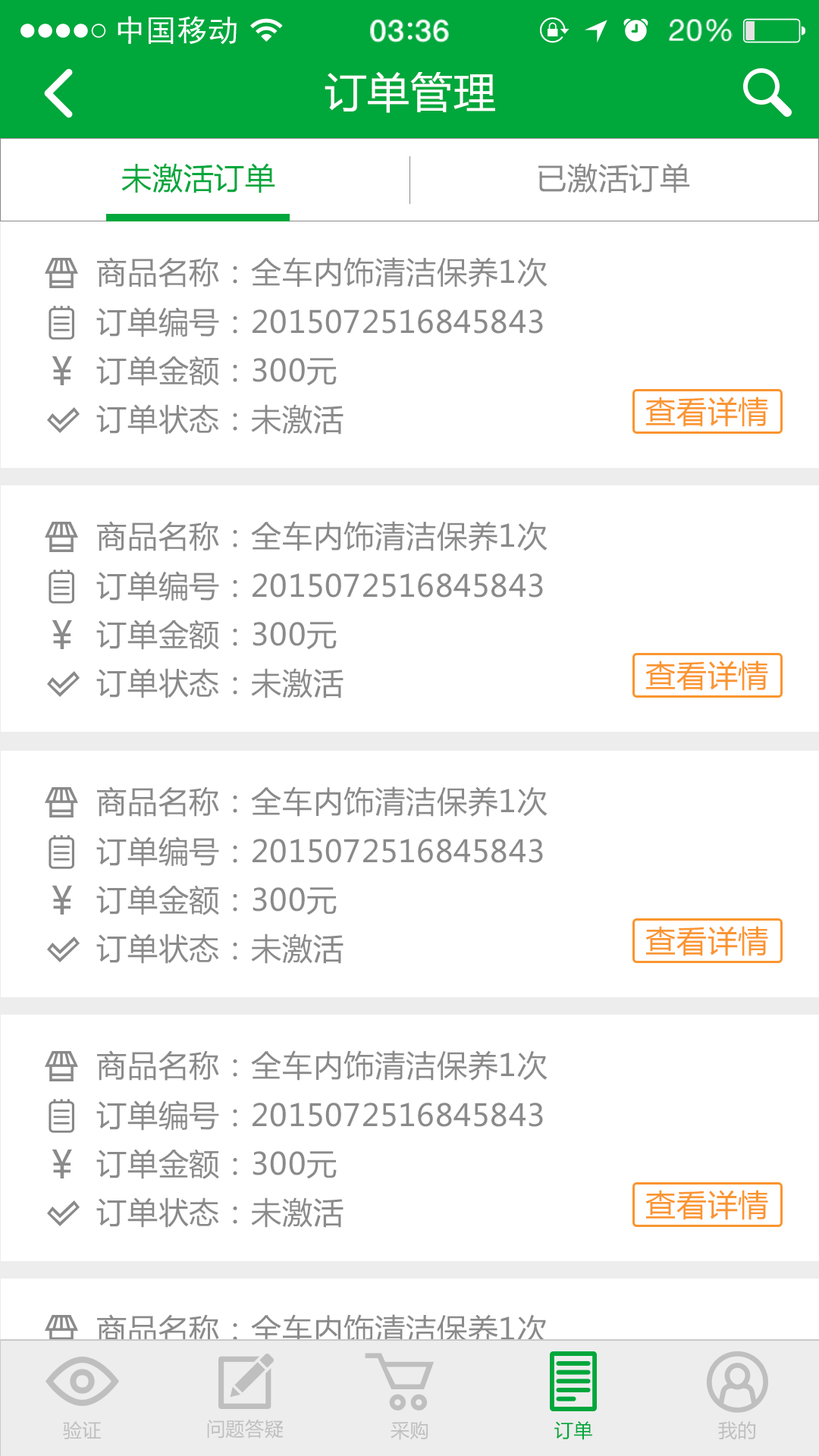
<style>
.page{position:relative;width:819px;height:1456px;background:#ffffff}
.page>*{position:absolute;margin:0}
.t1{font:41.7px "MicrosoftYaHei";letter-spacing:0.02em;color:#ffffff}
.t2{font:30.3px "MicrosoftYaHei";letter-spacing:0.02em;color:#00a73b}
.t3{font:30.3px "MicrosoftYaHei";letter-spacing:0.02em;color:#8a8a8a}
.t4{font:38.4px "MicrosoftYaHei";letter-spacing:0.02em;color:#8a8a8a}
.t5{font:30.3px "MicrosoftYaHei";letter-spacing:0.02em;color:#fa9531}
.t6{font:18.9px "MicrosoftYaHei";letter-spacing:0.02em;color:#bfbfbf}
.t7{font:18.9px "MicrosoftYaHei";letter-spacing:0.02em;color:#00a73b}
</style>
<div class="page">
<p class="t1" style="left:325px;top:71px;width:170px;height:42px">订单管理</p>
<p class="t2" style="left:121px;top:163px;width:154px;height:30px">未激活订单</p>
<p class="t3" style="left:538px;top:163px;width:152px;height:30px">已激活订单</p>
<p class="t3" style="left:97px;top:257px;width:451px;height:30px">商品名称：全车内饰清洁保养1次</p>
<p class="t3" style="left:96px;top:307px;width:447px;height:30px">订单编号：2015072516845843</p>
<p class="t4" style="left:52px;top:356px;width:20px;height:29px">¥</p>
<p class="t3" style="left:96px;top:356px;width:241px;height:30px">订单金额：300元</p>
<p class="t5" style="left:645px;top:397px;width:123px;height:30px">查看详情</p>
<p class="t3" style="left:96px;top:404px;width:248px;height:31px">订单状态：未激活</p>
<p class="t3" style="left:97px;top:521px;width:451px;height:30px">商品名称：全车内饰清洁保养1次</p>
<p class="t3" style="left:96px;top:571px;width:447px;height:30px">订单编号：2015072516845843</p>
<p class="t4" style="left:52px;top:620px;width:20px;height:29px">¥</p>
<p class="t3" style="left:96px;top:620px;width:241px;height:30px">订单金额：300元</p>
<p class="t5" style="left:645px;top:660px;width:123px;height:31px">查看详情</p>
<p class="t3" style="left:96px;top:668px;width:248px;height:30px">订单状态：未激活</p>
<p class="t3" style="left:97px;top:786px;width:451px;height:31px">商品名称：全车内饰清洁保养1次</p>
<p class="t3" style="left:96px;top:836px;width:447px;height:31px">订单编号：2015072516845843</p>
<p class="t4" style="left:52px;top:885px;width:20px;height:30px">¥</p>
<p class="t3" style="left:96px;top:885px;width:241px;height:30px">订单金额：300元</p>
<p class="t5" style="left:645px;top:926px;width:123px;height:30px">查看详情</p>
<p class="t3" style="left:96px;top:933px;width:248px;height:31px">订单状态：未激活</p>
<p class="t3" style="left:97px;top:1050px;width:451px;height:31px">商品名称：全车内饰清洁保养1次</p>
<p class="t3" style="left:96px;top:1100px;width:447px;height:31px">订单编号：2015072516845843</p>
<p class="t4" style="left:52px;top:1149px;width:20px;height:29px">¥</p>
<p class="t3" style="left:96px;top:1149px;width:241px;height:30px">订单金额：300元</p>
<p class="t5" style="left:645px;top:1190px;width:123px;height:30px">查看详情</p>
<p class="t3" style="left:96px;top:1197px;width:248px;height:31px">订单状态：未激活</p>
<p class="t3" style="left:97px;top:1314px;width:451px;height:31px">商品名称：全车内饰清洁保养1次</p>
<p class="t6" style="left:63px;top:1421px;width:38px;height:18px">验证</p>
<p class="t6" style="left:207px;top:1420px;width:77px;height:19px">问题答疑</p>
<p class="t6" style="left:391px;top:1421px;width:37px;height:19px">采购</p>
<p class="t7" style="left:554px;top:1421px;width:38px;height:19px">订单</p>
<p class="t6" style="left:718px;top:1421px;width:38px;height:19px">我的</p>
</div>
